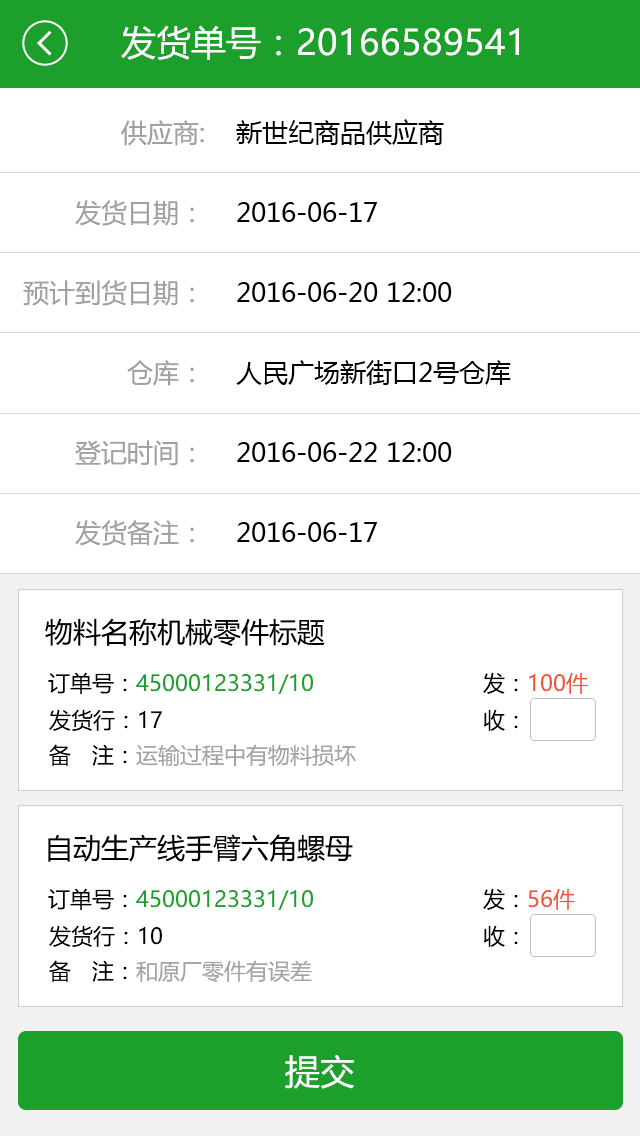
<style>
.page{position:relative;width:640px;height:1136px;background:#ffffff}
.page>*{position:absolute;margin:0}
.t1{font:35px "MicrosoftYaHei";color:#ffffff}
.t2{font:26px/80px "MicrosoftYaHei";color:#a0a0a0}
.t3{font:26px/80px "MicrosoftYaHei";color:#000000}
.t4{font:28px "MicrosoftYaHei";color:#000000}
.t5{font:22px "MicrosoftYaHei";color:#1da02b}
.t6{font:22px "MicrosoftYaHei";color:#000000}
.t7{font:22px "MicrosoftYaHei";color:#f45438}
.t8{font:22px "MicrosoftYaHei";color:#a3a3a3}
</style>
<div class="page">
<p class="t1" style="left:121px;top:25px;width:398px;height:35px">发货单号：20166589541</p>
<p class="t2" style="left:23px;top:120px;width:181px;height:426px;text-align:right">供应商:<br>发货日期：<br>预计到货日期：<br>仓库：<br>登记时间：<br>发货备注：</p>
<p class="t3" style="left:236px;top:119px;width:275px;height:423px">新世纪商品供应商<br>2016-06-17<br>2016-06-20 12:00<br>人民广场新街口2号仓库<br>2016-06-22 12:00<br>2016-06-17</p>
<p class="t4" style="left:45px;top:618px;width:280px;height:28px">物料名称机械零件标题</p>
<p class="t5" style="left:48px;top:672px;width:265px;height:22px"><span class="t6">订单号：</span>45000123331/10</p>
<p class="t7" style="left:483px;top:672px;width:105px;height:22px"><span class="t6">发：</span>100件</p>
<p class="t6" style="left:49px;top:709px;width:113px;height:22px">发货行：17</p>
<p class="t6" style="left:483px;top:709px;width:35px;height:22px">收：</p>
<p class="t8" style="left:49px;top:744px;width:307px;height:22px"><span class="t6">备   注：</span>运输过程中有物料损坏</p>
<p class="t4" style="left:48px;top:834px;width:305px;height:28px">自动生产线手臂六角螺母</p>
<p class="t5" style="left:48px;top:888px;width:265px;height:22px"><span class="t6">订单号：</span>45000123331/10</p>
<p class="t7" style="left:483px;top:888px;width:92px;height:22px"><span class="t6">发：</span>56件</p>
<p class="t6" style="left:49px;top:925px;width:113px;height:22px">发货行：10</p>
<p class="t6" style="left:483px;top:925px;width:35px;height:22px">收：</p>
<p class="t8" style="left:49px;top:960px;width:263px;height:22px"><span class="t6">备   注：</span>和原厂零件有误差</p>
<p class="t1" style="left:285px;top:1054px;width:69px;height:35px">提交</p>
</div>
